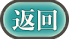
<style>
.page{position:relative;width:69px;height:39px}
.page>*{position:absolute;margin:0}
.t1{font:24px "RyuminPr6N-ExBold";color:#fff9f4}
</style>
<div class="page">
<p class="t1" style="left:12px;top:9px;width:45px;height:22px">返回</p>
</div>
